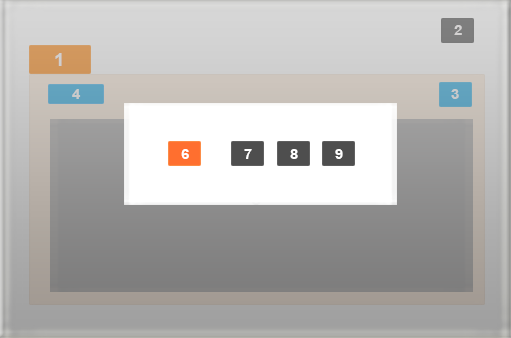
<style>
.page{position:relative;width:511px;height:338px}
.page>*{position:absolute;margin:0}
.t1{font:14px "Arial-BoldMT";letter-spacing:-0.025em;color:#d3d2d2;scale:1.06 1}
.t2{font:18px "Arial-BoldMT";letter-spacing:-0.025em;color:#d0d0cf;scale:1.06 1}
.t3{font:14px "Arial-BoldMT";letter-spacing:-0.025em;color:#cacaca;scale:1.06 1}
.t4{font:14px "Arial-BoldMT";letter-spacing:-0.025em;color:#ffffff;scale:1.06 1}
</style>
<div class="page">
<p class="t1" style="left:454px;top:25px;width:8px;height:10px">2</p>
<p class="t2" style="left:55px;top:53px;width:7px;height:13px">1</p>
<p class="t3" style="left:72px;top:89px;width:9px;height:10px">4</p>
<p class="t3" style="left:451px;top:89px;width:8px;height:10px">3</p>
<p class="t4" style="left:181px;top:149px;width:8px;height:10px">6</p>
<p class="t4" style="left:244px;top:149px;width:8px;height:10px">7</p>
<p class="t4" style="left:290px;top:149px;width:8px;height:10px">8</p>
<p class="t4" style="left:335px;top:149px;width:8px;height:10px">9</p>
</div>
